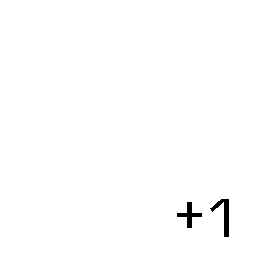
<style>
.page{position:relative;width:256px;height:256px;background:#ffffff}
.page>*{position:absolute;margin:0}
.t1{font:50.9px "Michroma";color:#000000}
</style>
<div class="page">
<p class="t1" style="left:177px;top:199px;width:52px;height:38px">+1</p>
</div>
